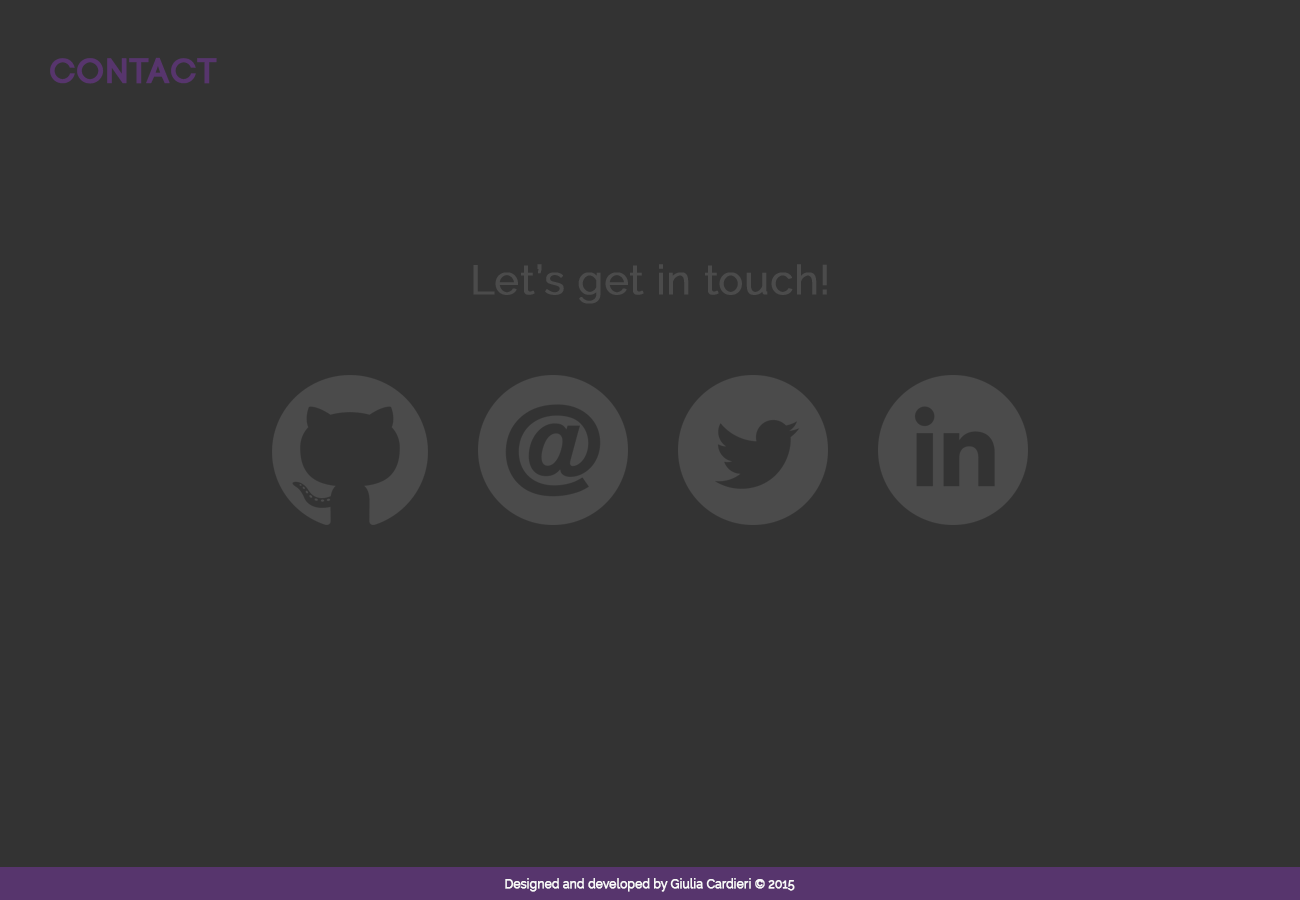
<style>
.page{position:relative;width:1300px;height:900px;background:#333333}
.page>*{position:absolute;margin:0}
.t1{font:60px "Code-Pro-Demo";letter-spacing:0.01em;color:#57356d;font-weight:bold}
.t2{font:70px "Raleway-Regular";letter-spacing:0.01em;color:#4b4b4b;font-weight:bold}
.t3{font:20px "Raleway-Regular";letter-spacing:0.01em;color:#f9f9f9;font-weight:bold}
</style>
<div class="page">
<p class="t1" style="left:50px;top:57px;width:167px;height:27px">CONTACT</p>
<p class="t2" style="left:473px;top:264px;width:354px;height:40px">Let’s get in touch!</p>
<p class="t3" style="left:505px;top:878px;width:290px;height:14px">Designed and developed by Giulia Cardieri © 2015</p>
</div>
